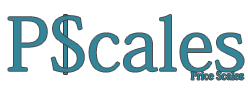
<style>
.page{position:relative;width:248px;height:89px;background:#ffffff}
.page>*{position:absolute;margin:0}
.t1{font:72px "AdobeKaitiStd-Regular";color:#338599}
.t2{font:10px "AdobeKaitiStd-Regular";color:#338599}
</style>
<div class="page">
<p class="t1" style="left:8px;top:14px;width:236px;height:58px">PScales</p>
<p class="t2" style="left:191px;top:71px;width:53px;height:9px">Price Scales</p>
</div>
